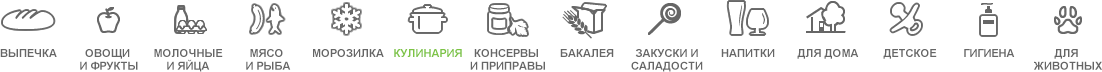
<style>
.page{position:relative;width:1102px;height:72px;background:#ffffff}
.page>*{position:absolute;margin:0}
.t1{font:11px "Arial-BoldMT";color:#666666}
.t2{font:11px/12.7px "Arial-BoldMT";color:#666666}
.t3{font:11px "Arial-BoldMT";color:#7dc444}
.t4{font:11px/12.7px "Arial-BoldMT";color:#656565}
</style>
<div class="page">
<p class="t1" style="left:0px;top:49px;width:57px;height:8px">ВЫПЕЧКА</p>
<p class="t2" style="left:80px;top:49px;width:58px;height:21px;text-align:center">ОВОЩИ <br>И ФРУКТЫ</p>
<p class="t2" style="left:154px;top:49px;width:69px;height:23px;text-align:center">МОЛОЧНЫЕ<br>И ЯЙЦА</p>
<p class="t2" style="left:246px;top:49px;width:45px;height:21px;text-align:center">МЯСО <br>И РЫБА</p>
<p class="t1" style="left:313px;top:49px;width:71px;height:8px">МОРОЗИЛКА</p>
<p class="t3" style="left:394px;top:49px;width:68px;height:8px">КУЛИНАРИЯ</p>
<p class="t2" style="left:470px;top:49px;width:75px;height:21px;text-align:center">КОНСЕРВЫ <br>И ПРИПРАВЫ</p>
<p class="t1" style="left:560px;top:49px;width:54px;height:8px">БАКАЛЕЯ</p>
<p class="t2" style="left:631px;top:49px;width:72px;height:23px;text-align:center">ЗАКУСКИ И<br>САЛАДОСТИ</p>
<p class="t1" style="left:721px;top:49px;width:54px;height:8px">НАПИТКИ</p>
<p class="t1" style="left:797px;top:49px;width:62px;height:10px">ДЛЯ ДОМА</p>
<p class="t1" style="left:883px;top:49px;width:54px;height:10px">ДЕТСКОЕ</p>
<p class="t1" style="left:964px;top:49px;width:51px;height:8px">ГИГИЕНА</p>
<p class="t4" style="left:1034px;top:49px;width:68px;height:21px;text-align:center">ДЛЯ <br>ЖИВОТНЫХ</p>
</div>
